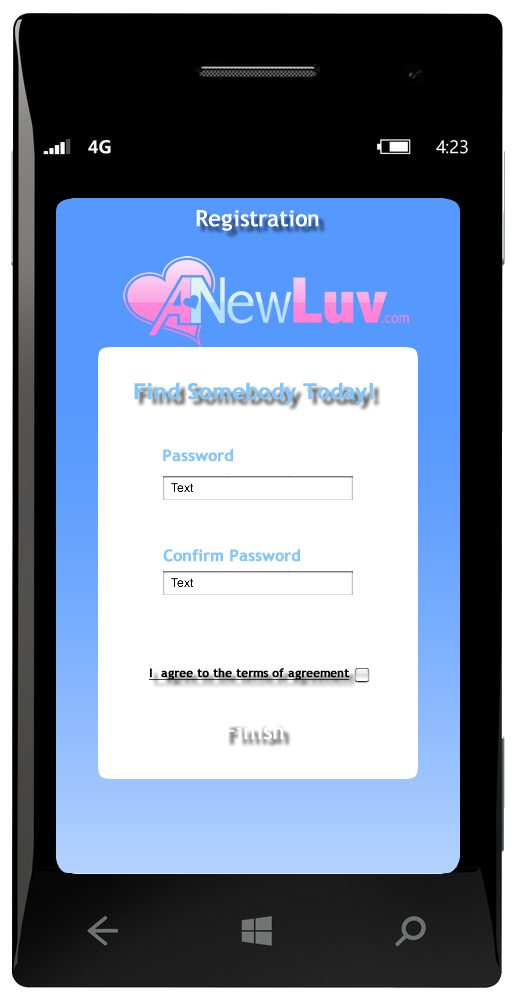
<style>
.page{position:relative;width:515px;height:1000px;background:#ffffff}
.page>*{position:absolute;margin:0}
.t1{font:22px "TrebuchetMS";color:#ffffff;font-weight:bold}
.t2{font:22px "TrebuchetMS-Bold";color:#85c6f8;font-weight:bold}
.t3{font:16px "TrebuchetMS-Bold";color:#85c5f8;font-weight:bold}
.t4{font:12px "TrebuchetMS";color:#000000;font-weight:bold;text-decoration:underline}
</style>
<div class="page">
<p class="t1" style="left:196px;top:210px;width:123px;height:21px">Registration</p>
<p class="t2" style="left:134px;top:382px;width:240px;height:22px">Find Somebody Today!</p>
<p class="t3" style="left:163px;top:449px;width:70px;height:13px">Password</p>
<p class="t3" style="left:163px;top:549px;width:137px;height:13px">Confirm Password</p>
<p class="t4" style="left:149px;top:668px;width:201px;height:12px">I  agree to the terms of agreement</p>
<p class="t1" style="left:225px;top:722px;width:59px;height:18px">Finish</p>
</div>
